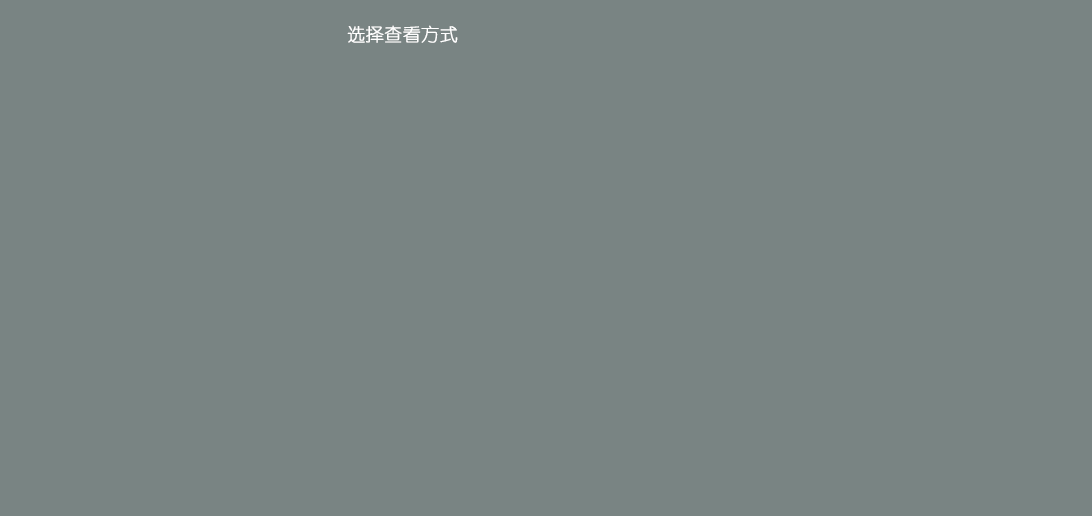
<style>
.page{position:relative;width:1092px;height:516px;background:#798483}
.page>*{position:absolute;margin:0}
.t1{font:18px "YouYuan";color:#ffffff;font-weight:bold}
</style>
<div class="page">
<p class="t1" style="left:347px;top:25px;width:111px;height:18px">选择查看方式</p>
</div>
